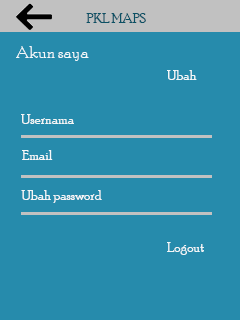
<style>
.page{position:relative;width:240px;height:320px;background:#268bac}
.page>*{position:absolute;margin:0}
.t1{font:14px "PoorRichard-Regular";color:#0b5064}
.t2{font:18px "PoorRichard-Regular";color:#f3f9fb}
.t3{font:14px "PoorRichard-Regular";color:#f3f8f9}
.t4{font:14px "PoorRichard-Regular";color:#f2f5f6}
.t5{font:14px "PoorRichard-Regular";color:#f5f9fa}
.t6{font:14px "PoorRichard-Regular";color:#f4f7f8}
.t7{font:14px "PoorRichard-Regular";color:#f2f7f8}
</style>
<div class="page">
<p class="t1" style="left:86px;top:13px;width:60px;height:10px">PKL MAPS</p>
<p class="t2" style="left:16px;top:46px;width:73px;height:15px">Akun saya</p>
<p class="t3" style="left:167px;top:70px;width:30px;height:10px">Ubah</p>
<p class="t4" style="left:21px;top:114px;width:53px;height:10px">Usernama</p>
<p class="t5" style="left:22px;top:150px;width:31px;height:10px">Email</p>
<p class="t6" style="left:21px;top:190px;width:81px;height:13px">Ubah password</p>
<p class="t7" style="left:167px;top:242px;width:37px;height:13px">Logout</p>
</div>
